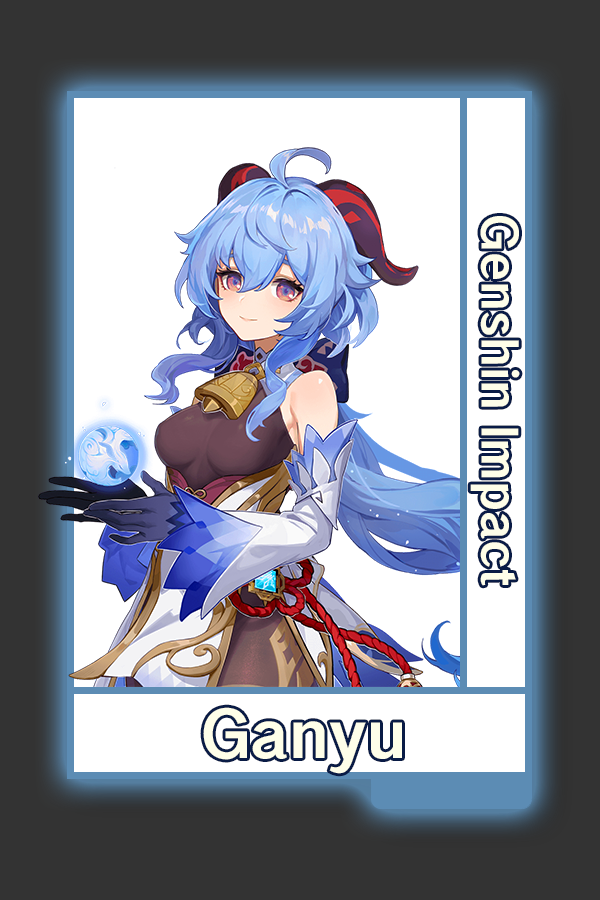
<style>
.page{position:relative;width:600px;height:900px;background:#ffffff}
.page>*{position:absolute;margin:0}
.t1{font:48.8px "HYWenHei-HEW";color:#fefef4}
.t2{font:65.2px "HYWenHei-HEW";color:#fefef4}
</style>
<div class="page">
<p class="t1" style="left:470px;top:216px;width:50px;height:370px;rotate:90deg">Genshin Impact</p>
<p class="t2" style="left:203px;top:707px;width:199px;height:67px">Ganyu</p>
</div>
